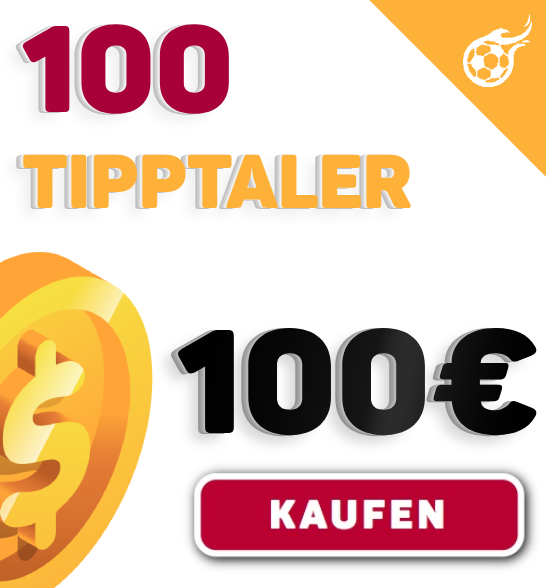
<style>
.page{position:relative;width:546px;height:588px;background:#ffffff}
.page>*{position:absolute;margin:0}
.t1{font:75px "Panton-BlackCaps";color:#feb139}
.t2{font:121px "Panton-BlackCaps";color:#a80038}
.t3{font:145px "Panton-BlackCaps";color:#000000}
</style>
<div class="page">
<p class="t1" style="left:21px;top:24px;width:391px;height:184px"><span class="t2">100 <br></span>TippTaler</p>
<p class="t3" style="left:176px;top:327px;width:362px;height:109px">100€</p>
</div>
